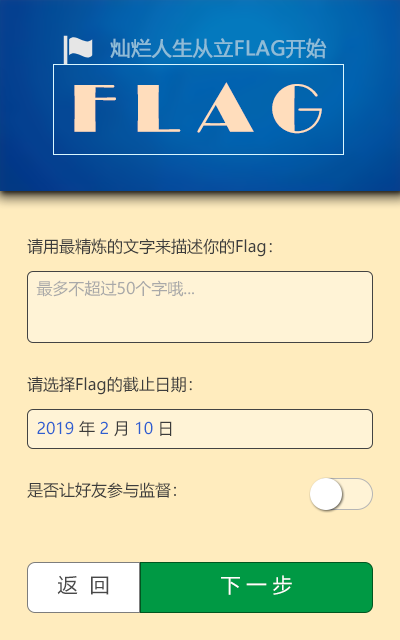
<style>
.page{position:relative;width:400px;height:640px;background:#ffecbe}
.page>*{position:absolute;margin:0}
.t1{font:20px "MicrosoftYaHei";color:#8ebcd7;font-weight:bold}
.t2{font:70px "Broadway";color:#ffddbc}
.t3{font:16px "MicrosoftYaHei";color:#3d3d3d}
.t4{font:16px "MicrosoftYaHei";color:#a9a9a9}
.t5{font:16px "MicrosoftYaHei";color:#2e5fd0}
.t6{font:16px "MicrosoftYaHei";color:#3b3b3b}
.t7{font:20px "MicrosoftYaHei";color:#494949}
.t8{font:20px "MicrosoftYaHei";color:#ffffff}
</style>
<div class="page">
<p class="t1" style="left:110px;top:38px;width:217px;height:21px">灿烂人生从立FLAG开始</p>
<p class="t2" style="left:74px;top:82px;width:248px;height:52px">F L A G</p>
<p class="t3" style="left:27px;top:238px;width:245px;height:19px">请用最精炼的文字来描述你的Flag：</p>
<p class="t4" style="left:36px;top:280px;width:158px;height:17px">最多不超过50个字哦...</p>
<p class="t3" style="left:27px;top:376px;width:165px;height:19px">请选择Flag的截止日期：</p>
<p class="t5" style="left:37px;top:420px;width:135px;height:17px">2019<span class="t6"> 年 </span>2<span class="t6"> 月 </span>10<span class="t6"> 日</span></p>
<p class="t3" style="left:27px;top:482px;width:149px;height:16px">是否让好友参与监督：</p>
<p class="t7" style="left:57px;top:575px;width:52px;height:20px">返  回</p>
<p class="t8" style="left:221px;top:575px;width:71px;height:20px">下 一 步</p>
</div>
